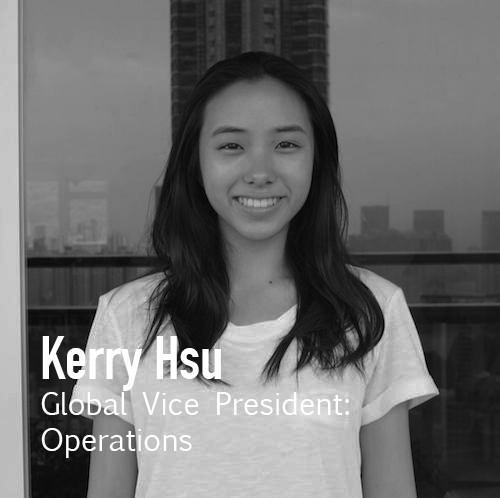
<style>
.page{position:relative;width:500px;height:498px}
.page>*{position:absolute;margin:0}
.t1{font:30px "EuphemiaUCAS";color:#ffffff}
.t2{font:60px "DINCondensed-Bold";color:#ffffff}
</style>
<div class="page">
<p class="t1" style="left:41px;top:336px;width:308px;height:122px"><span class="t2">Kerry Hsu<br></span>Global Vice President:<br>Operations</p>
</div>
